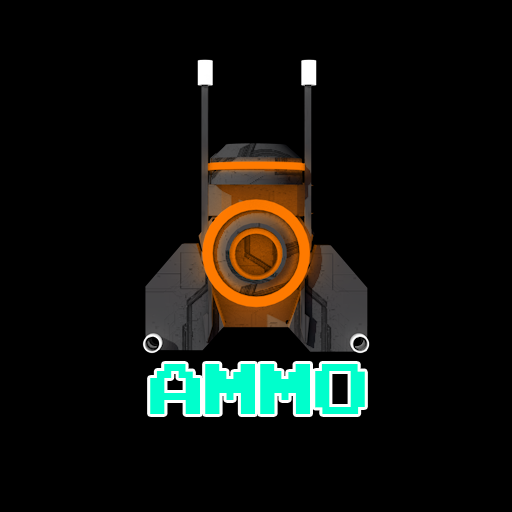
<style>
.page{position:relative;width:512px;height:512px;background:#000000}
.page>*{position:absolute;margin:0}
.t1{font:100px "ArcadeClassic";color:#00ffcc}
</style>
<div class="page">
<p class="t1" style="left:150px;top:364px;width:215px;height:50px">Ammo</p>
</div>
